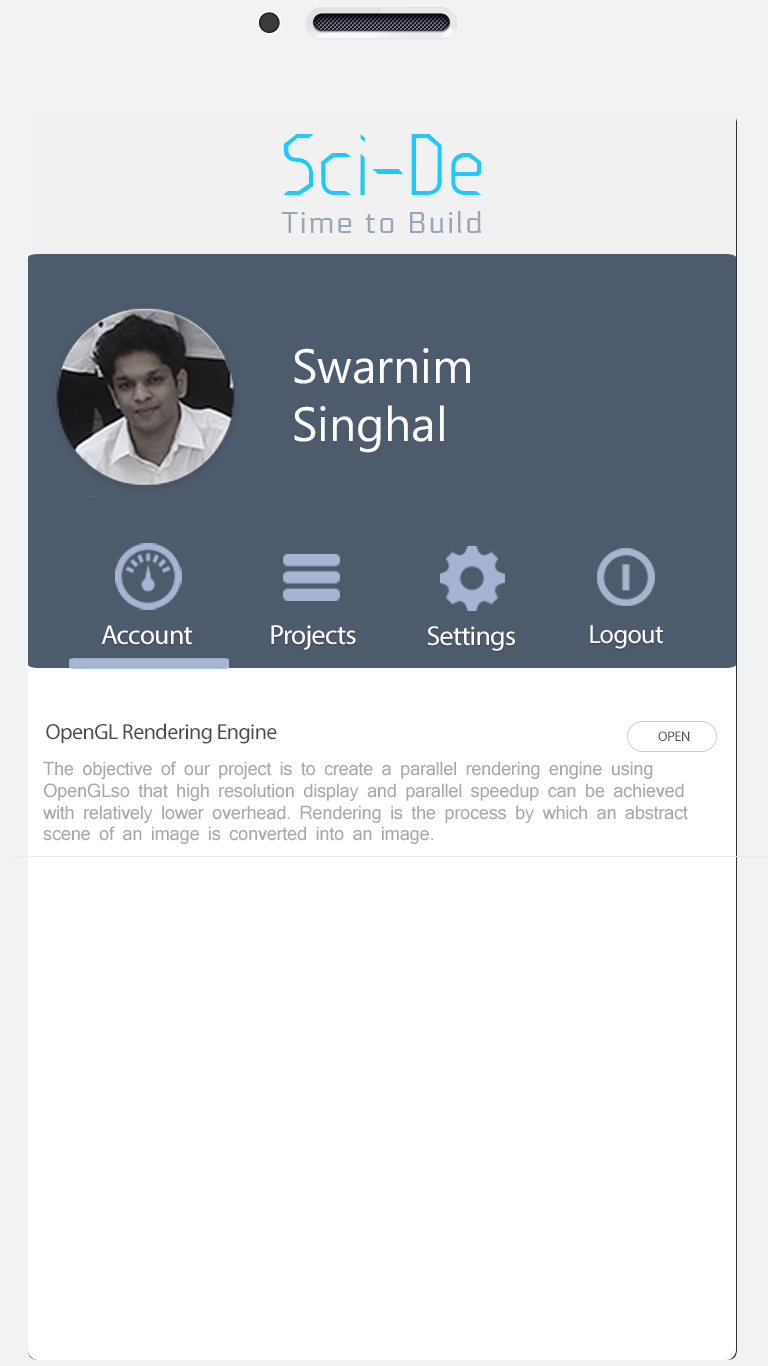
<style>
.page{position:relative;width:768px;height:1366px;background:#ffffff}
.page>*{position:absolute;margin:0}
.t1{font:72px "Eclectic";color:#1fcaf6}
.t2{font:30px "Electrolize-Regular";letter-spacing:0.075em;color:#9aa6b6}
.t3{font:48px "MicrosoftPhagsPa";color:#ffffff}
.t4{font:27.6px "MyriadPro-Regular";letter-spacing:-0.025em;color:#ffffff}
.t5{font:26.3px "MyriadPro-Regular";letter-spacing:-0.025em;color:#ffffff}
.t6{font:22px "MyriadPro-Regular";letter-spacing:-0.025em;color:#4b4b4b}
.t7{font:14px "MyriadPro-Regular";letter-spacing:-0.025em;color:#4b4b4b;text-transform:uppercase}
.t8{font:18px "Mangal";letter-spacing:-0.025em;color:#a8a8a8}
</style>
<div class="page">
<p class="t1" style="left:283px;top:134px;width:199px;height:61px">Sci-De</p>
<p class="t2" style="left:281px;top:211px;width:200px;height:22px">Time to Build</p>
<p class="t3" style="left:294px;top:348px;width:176px;height:105px">Swarnim<br>Singhal</p>
<p class="t4" style="left:101px;top:625px;width:91px;height:20px">Account</p>
<p class="t4" style="left:271px;top:625px;width:85px;height:25px">Projects</p>
<p class="t4" style="left:427px;top:626px;width:88px;height:25px">Settings</p>
<p class="t5" style="left:590px;top:625px;width:73px;height:24px">Logout</p>
<p class="t6" style="left:46px;top:723px;width:231px;height:21px">OpenGL Rendering Engine</p>
<p class="t7" style="left:658px;top:731px;width:32px;height:10px">Open</p>
<p class="t8" style="left:43px;top:761px;width:645px;height:83px;text-align:justify">The objective of our project is to create a parallel rendering engine using<br>OpenGLso that high resolution display and parallel speedup can be achieved <br>with relatively lower overhead. Rendering is the process by which an abstract <br>scene of an image is converted into an image.</p>
</div>
